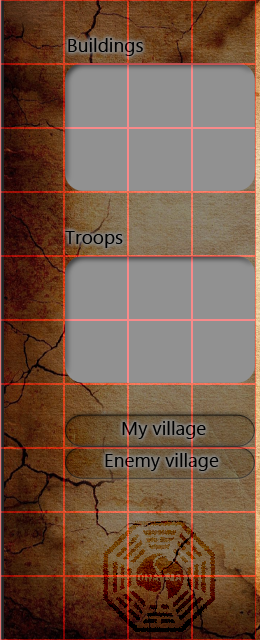
<style>
.page{position:relative;width:260px;height:640px;background:#919191}
.page>*{position:absolute;margin:0}
.t1{font:19px "Gadugi";color:#000000}
</style>
<div class="page">
<p class="t1" style="left:68px;top:38px;width:75px;height:18px">Buildings</p>
<p class="t1" style="left:65px;top:231px;width:58px;height:17px">Troops</p>
<p class="t1" style="left:122px;top:421px;width:84px;height:18px">My village</p>
<p class="t1" style="left:105px;top:453px;width:114px;height:18px">Enemy village</p>
</div>
